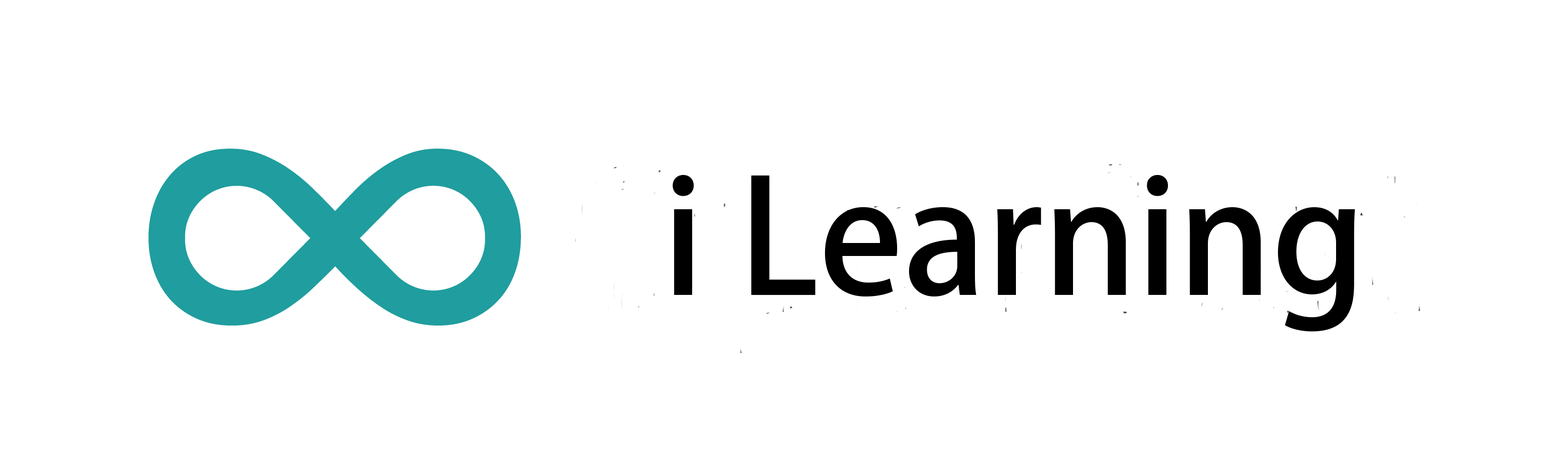
<style>
.page{position:relative;width:1568px;height:473px;background:#ffffff}
.page>*{position:absolute;margin:0}
.t1{font:155.7px "AdobeHeitiStd-Regular";color:#000000}
</style>
<div class="page">
<p class="t1" style="left:672px;top:175px;width:683px;height:157px">i Learning</p>
</div>
